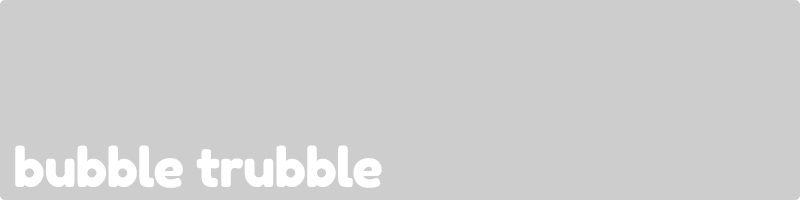
<style>
.page{position:relative;width:800px;height:200px;background:#cdcdcd}
.page>*{position:absolute;margin:0}
.t1{font:53.5px "FredokaOne-Regular";letter-spacing:-0.015em;color:#ffffff}
</style>
<div class="page">
<p class="t1" style="left:15px;top:145px;width:367px;height:43px">bubble trubble</p>
</div>
